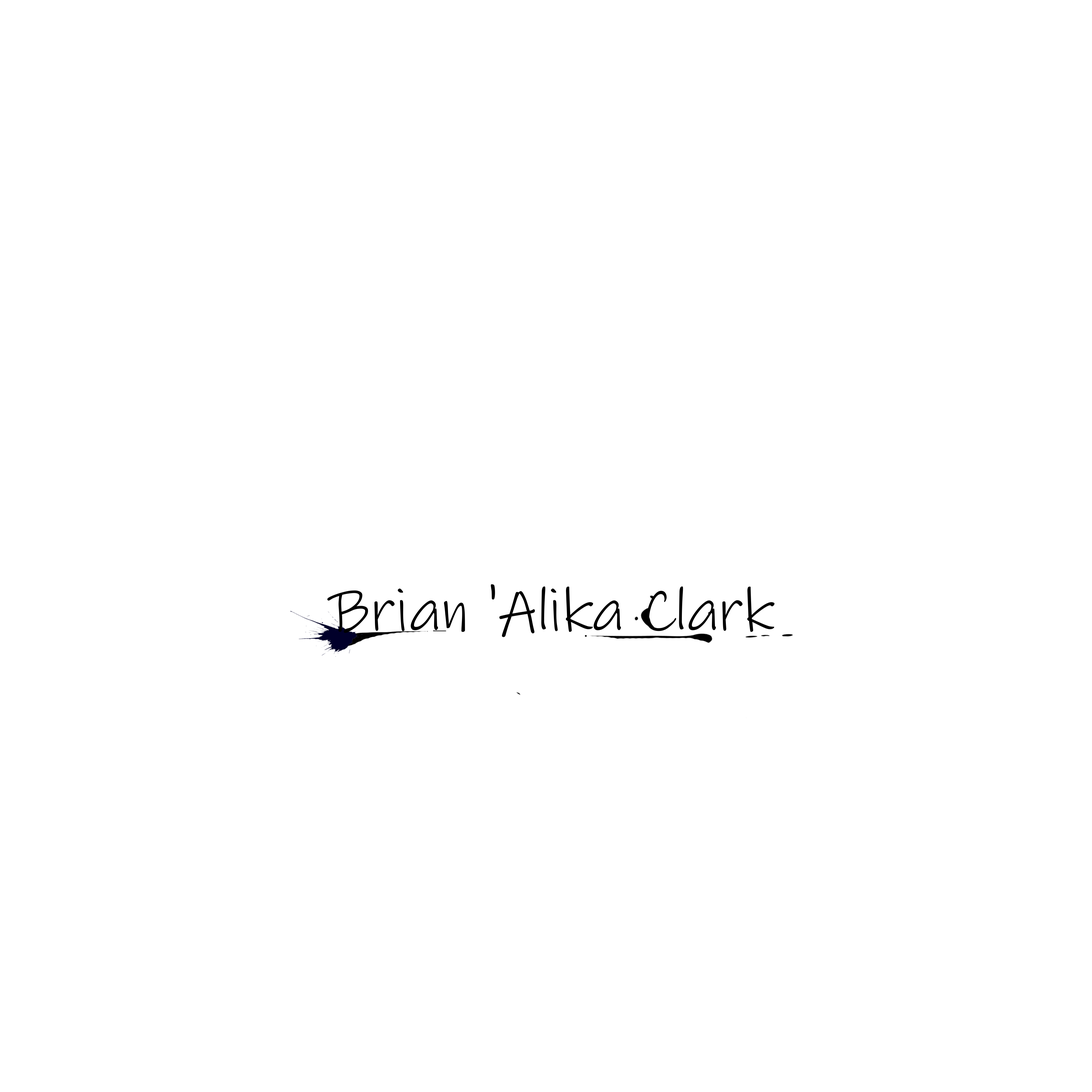
<style>
.page{position:relative;width:1092px;height:1092px;background:#ffffff}
.page>*{position:absolute;margin:0}
.t1{font:60.7px "InkFree";color:#000000}
</style>
<div class="page">
<p class="t1" style="left:327px;top:584px;width:448px;height:53px">Brian 'Alika Clark</p>
</div>
